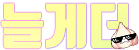
<style>
.page{position:relative;width:139px;height:50px;background:#ffffff}
.page>*{position:absolute;margin:0}
.t1{font:48.2px "TmonMonsoriBlack";color:#feffa0}
</style>
<div class="page">
<p class="t1" style="left:1px;top:3px;width:127px;height:46px">늘게더</p>
</div>
